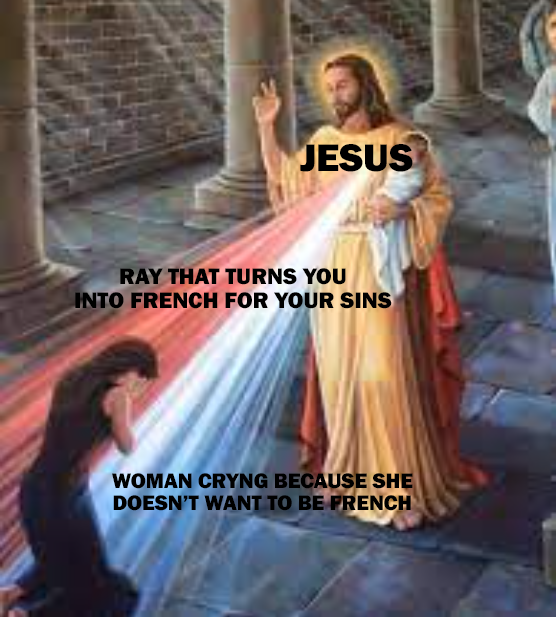
<style>
.page{position:relative;width:556px;height:617px}
.page>*{position:absolute;margin:0}
.t1{font:39.7px "FranklinGothic-Heavy";color:#000000}
.t2{font:23.2px "FranklinGothic-Heavy";color:#000000}
.t3{font:21.6px "FranklinGothic-Heavy";color:#000000}
</style>
<div class="page">
<p class="t1" style="left:300px;top:144px;width:113px;height:28px">JESUS</p>
<p class="t2" style="left:75px;top:268px;width:317px;height:41px;text-align:center">RAY THAT TURNS YOU<br>INTO FRENCH FOR YOUR SINS</p>
<p class="t3" style="left:112px;top:473px;width:301px;height:38px;text-align:center">WOMAN CRYNG BECAUSE SHE<br>DOESN’T WANT TO BE FRENCH</p>
</div>
